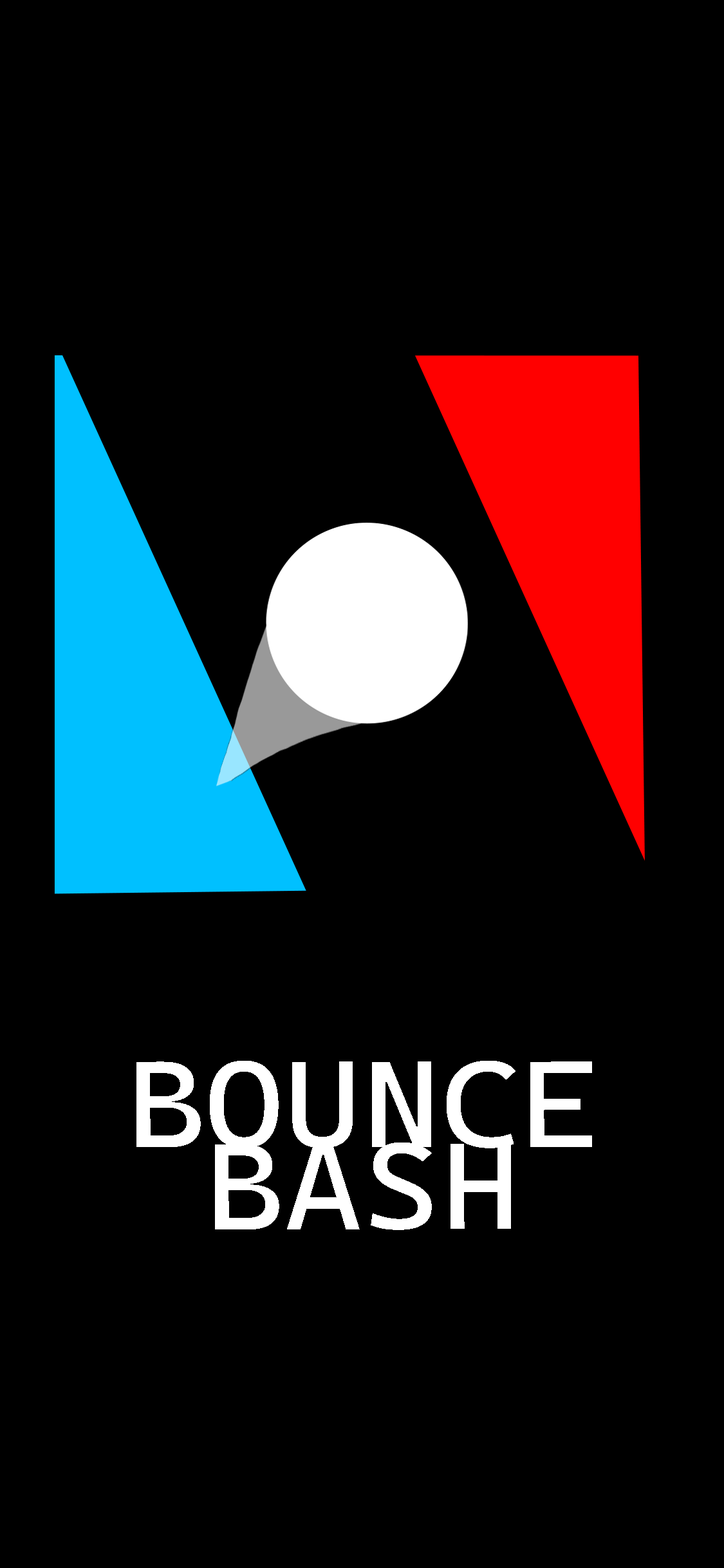
<style>
.page{position:relative;width:724px;height:1568px;background:#000000}
.page>*{position:absolute;margin:0}
.t1{font:123.2px/82.1px "CascadiaCode-Regular";color:#ffffff;font-weight:bold;scale:1.09 1}
</style>
<div class="page">
<p class="t1" style="left:136px;top:1061px;width:456px;height:169px;text-align:center">BOUNCE<br>BASH</p>
</div>
